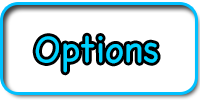
<style>
.page{position:relative;width:200px;height:100px;background:#ffffff}
.page>*{position:absolute;margin:0}
.t1{font:37.5px "Chalkboard";color:#00d2ff}
</style>
<div class="page">
<p class="t1" style="left:35px;top:35px;width:123px;height:38px">Options</p>
</div>
